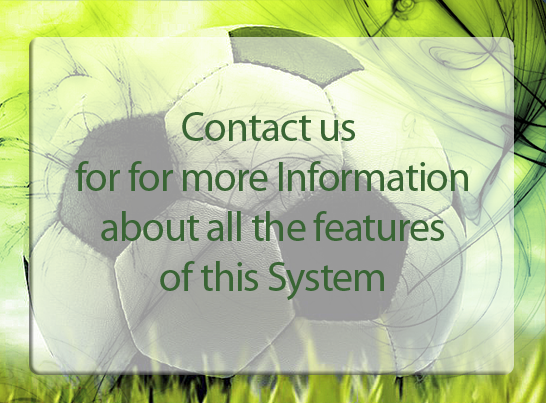
<style>
.page{position:relative;width:546px;height:403px}
.page>*{position:absolute;margin:0}
.t1{font:41.7px "MyriadPro-Regular";letter-spacing:-0.025em;color:#396534}
</style>
<div class="page">
<p class="t1" style="left:75px;top:112px;width:393px;height:188px;text-align:center">Contact us <br>for for more Information<br>about all the features<br>of this System</p>
</div>
